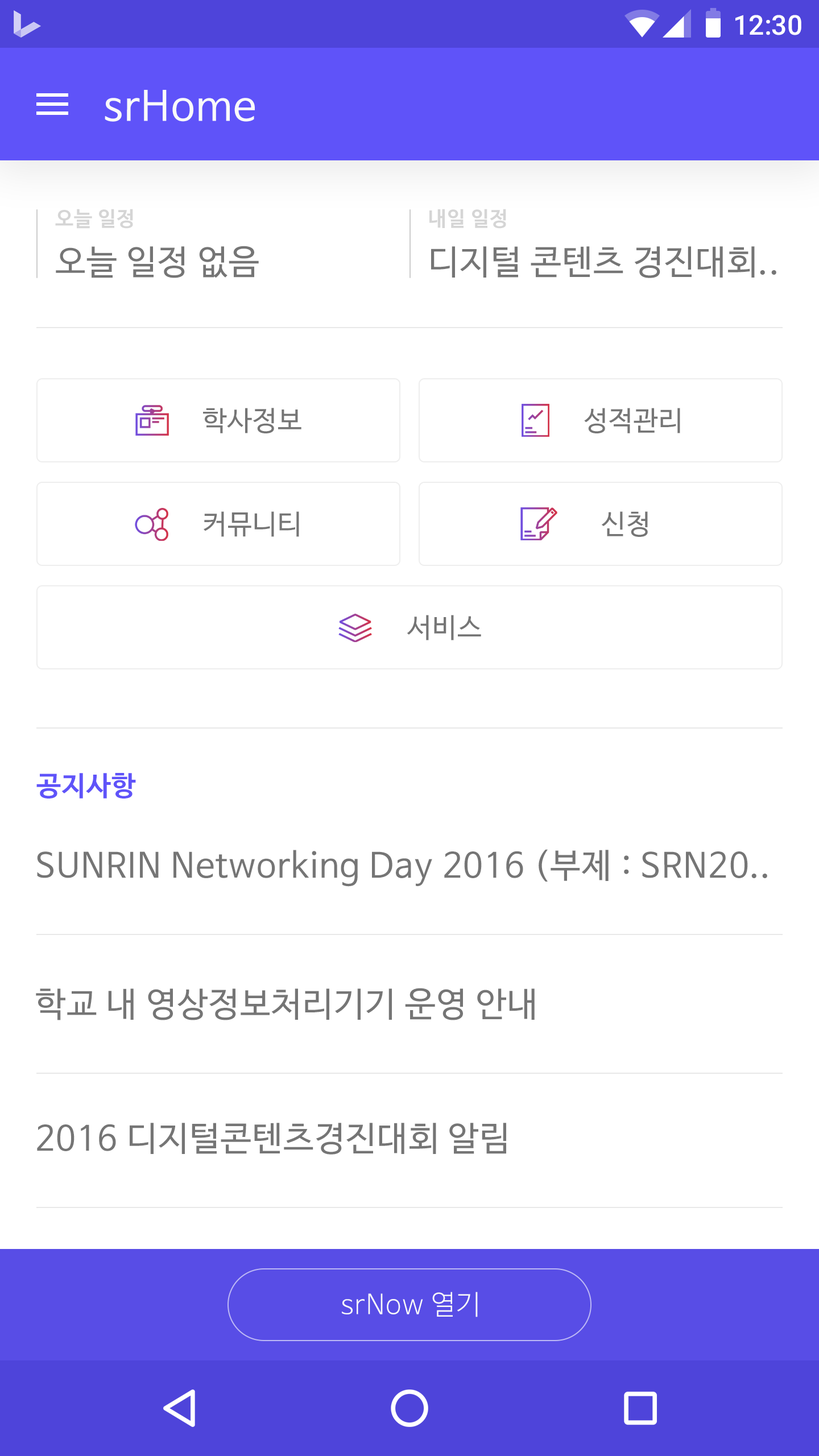
<style>
.page{position:relative;width:819px;height:1456px;background:#ffffff}
.page>*{position:absolute;margin:0}
.t1{font:27.3px "Roboto-Medium";color:#ffffff}
.t2{font:40.9px "NanumBarunGothic";letter-spacing:0.025em;color:#fafafa}
.t3{font:20.5px "NanumBarunGothicBold";letter-spacing:0.025em;color:#d5d5d5}
.t4{font:34.1px "NanumBarunGothic";letter-spacing:0.025em;color:#757575}
.t5{font:27.3px "NanumBarunGothic";letter-spacing:0.025em;color:#757575}
.t6{font:27.3px "NanumBarunGothicBold";letter-spacing:0.025em;color:#5f53f9}
.t7{font:27.3px "NanumBarunGothicLight";letter-spacing:0.025em;color:#fafafa}
</style>
<div class="page">
<p class="t1" style="left:735px;top:15px;width:66px;height:20px">12:30</p>
<p class="t2" style="left:105px;top:90px;width:150px;height:32px">srHome</p>
<p class="t3" style="left:55px;top:209px;width:78px;height:20px">오늘 일정</p>
<p class="t3" style="left:429px;top:209px;width:77px;height:20px">내일 일정</p>
<p class="t4" style="left:56px;top:246px;width:203px;height:32px">오늘 일정 없음</p>
<p class="t4" style="left:431px;top:246px;width:345px;height:32px">디지털 콘텐츠 경진대회..</p>
<p class="t5" style="left:203px;top:408px;width:98px;height:25px">학사정보</p>
<p class="t5" style="left:584px;top:408px;width:96px;height:25px">성적관리</p>
<p class="t5" style="left:204px;top:511px;width:95px;height:26px">커뮤니티</p>
<p class="t5" style="left:601px;top:511px;width:47px;height:26px">신청</p>
<p class="t5" style="left:407px;top:615px;width:74px;height:25px">서비스</p>
<p class="t6" style="left:36px;top:773px;width:100px;height:26px">공지사항</p>
<p class="t4" style="left:37px;top:849px;width:730px;height:38px">SUNRIN Networking Day 2016 (부제 : SRN20..</p>
<p class="t4" style="left:36px;top:988px;width:499px;height:32px">학교 내 영상정보처리기기 운영 안내</p>
<p class="t4" style="left:37px;top:1123px;width:469px;height:32px">2016 디지털콘텐츠경진대회 알림</p>
<p class="t7" style="left:342px;top:1292px;width:136px;height:25px">srNow 열기</p>
</div>
